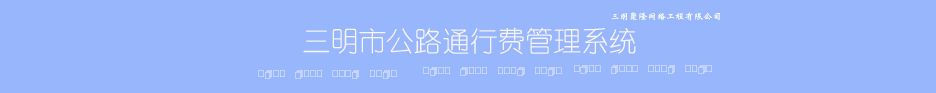
<style>
.page{position:relative;width:936px;height:93px;background:#98b6fc}
.page>*{position:absolute;margin:0}
.t1{font:9.3px "STXinwei";color:#f1f3f7}
.t2{font:27.9px "YouYuan";color:#f9f4f6}
</style>
<div class="page">
<p class="t1" style="left:611px;top:12px;width:109px;height:9px">三明聚隆网络工程有限公司</p>
<p class="t2" style="left:303px;top:27px;width:333px;height:28px">三明市公路通行费管理系统</p>
</div>
